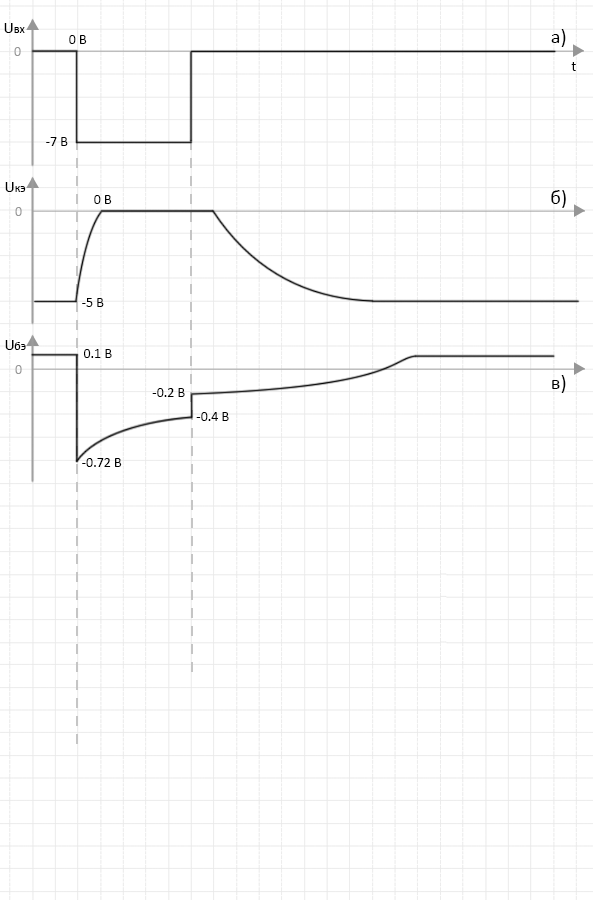
<style>
.page{position:relative;width:593px;height:900px;background:#ffffff}
.page>*{position:absolute;margin:0}
.t1{font:16px "Calibri";color:#000000}
.t2{font:12px "Calibri";color:#000000}
.t3{font:20px "Calibri";color:#000000}
.t4{font:14px "Calibri";color:#000000}
.t5{font:14px "Calibri";color:#969696}
</style>
<div class="page">
<p class="t1" style="left:4px;top:23px;width:9px;height:10px">U</p>
<p class="t2" style="left:14px;top:27px;width:11px;height:6px">вх</p>
<p class="t3" style="left:551px;top:29px;width:15px;height:18px">а)</p>
<p class="t4" style="left:69px;top:35px;width:18px;height:9px">0 В</p>
<p class="t5" style="left:14px;top:47px;width:7px;height:9px">0</p>
<p class="t4" style="left:571px;top:62px;width:5px;height:9px">t</p>
<p class="t4" style="left:46px;top:137px;width:22px;height:9px">-7 В</p>
<p class="t1" style="left:5px;top:182px;width:9px;height:10px">U</p>
<p class="t2" style="left:15px;top:186px;width:11px;height:6px">кэ</p>
<p class="t4" style="left:94px;top:195px;width:18px;height:9px">0 В</p>
<p class="t3" style="left:551px;top:190px;width:15px;height:18px">б)</p>
<p class="t5" style="left:15px;top:207px;width:7px;height:9px">0</p>
<p class="t4" style="left:82px;top:298px;width:22px;height:9px">-5 В</p>
<p class="t1" style="left:5px;top:340px;width:9px;height:10px">U</p>
<p class="t2" style="left:14px;top:342px;width:12px;height:8px">бэ</p>
<p class="t4" style="left:84px;top:349px;width:28px;height:9px">0.1 В</p>
<p class="t5" style="left:15px;top:365px;width:7px;height:9px">0</p>
<p class="t3" style="left:552px;top:375px;width:14px;height:18px">в)</p>
<p class="t4" style="left:152px;top:388px;width:33px;height:9px">-0.2 В</p>
<p class="t4" style="left:196px;top:412px;width:33px;height:9px">-0.4 В</p>
<p class="t4" style="left:82px;top:458px;width:40px;height:9px">-0.72 В</p>
</div>
